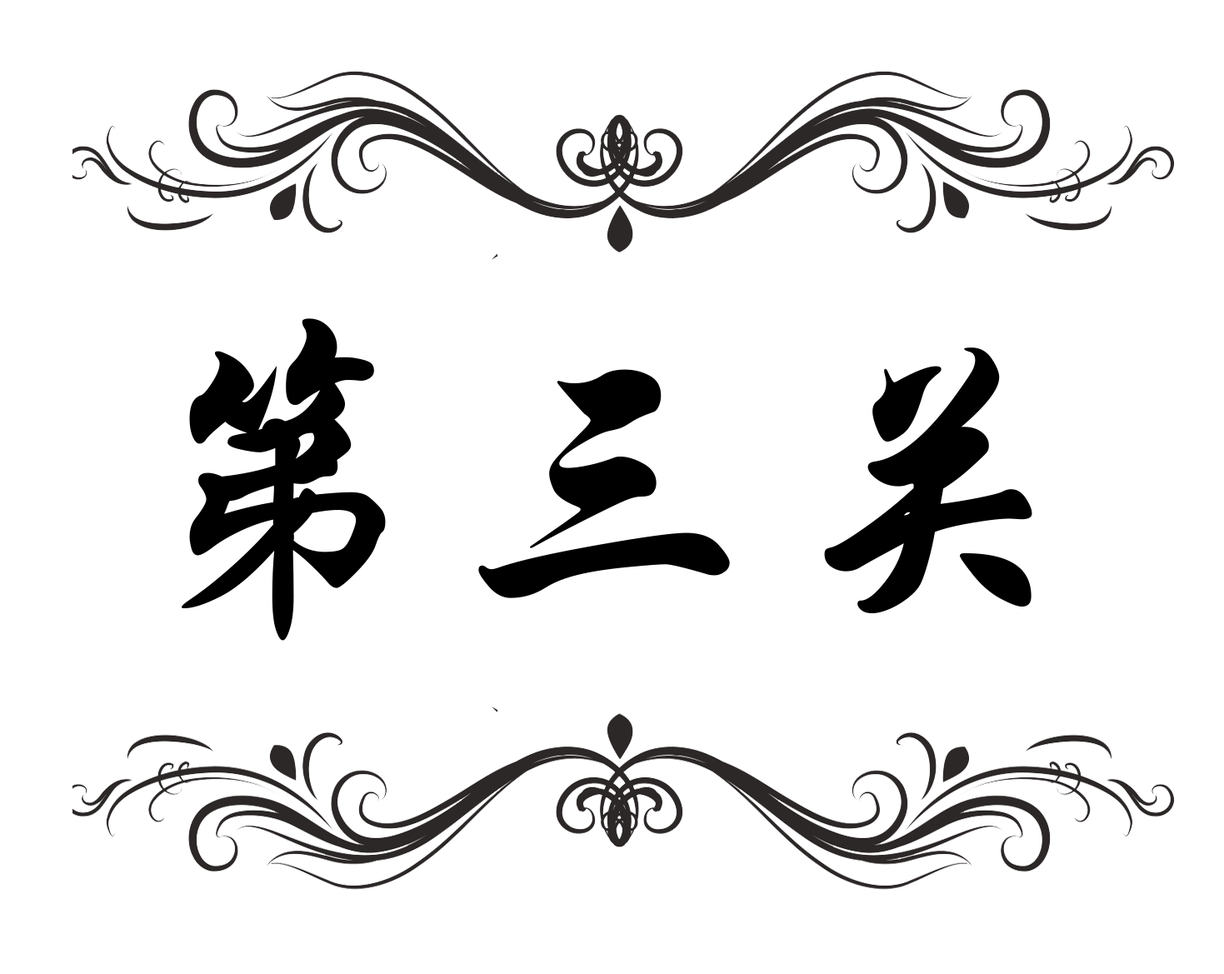
<style>
.page{position:relative;width:1224px;height:974px;background:#ffffff}
.page>*{position:absolute;margin:0}
.t1{font:333.3px "STXingkai";color:#000000}
</style>
<div class="page">
<p class="t1" style="left:182px;top:318px;width:850px;height:323px">第三关</p>
</div>
